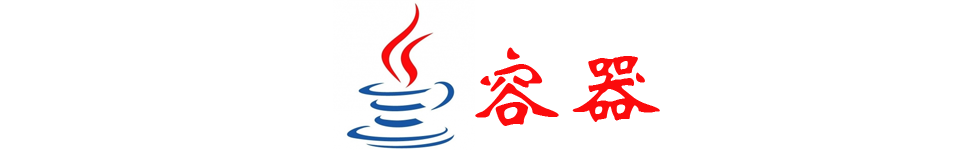
<style>
.page{position:relative;width:977px;height:150px;background:#ffffff}
.page>*{position:absolute;margin:0}
.t1{font:100px "STXinwei";color:#fb0b0c}
</style>
<div class="page">
<p class="t1" style="left:475px;top:47px;width:185px;height:79px">容器</p>
</div>
